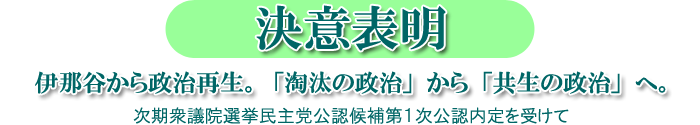
<style>
.page{position:relative;width:700px;height:125px;background:#ffffff}
.page>*{position:absolute;margin:0}
.t1{font:48px "HGPMinchoE";color:#006666}
.t2{font:24px "HGPMinchoE";color:#006666}
.t3{font:18px "HGPGothicM";color:#006666}
</style>
<div class="page">
<p class="t1" style="left:256px;top:5px;width:190px;height:46px">決意表明</p>
<p class="t2" style="left:35px;top:71px;width:631px;height:23px">伊那谷から政治再生。「淘汰の政治」から「共生の政治」へ。</p>
<p class="t3" style="left:133px;top:107px;width:436px;height:17px">次期衆議院選挙民主党公認候補第１次公認内定を受けて</p>
</div>
